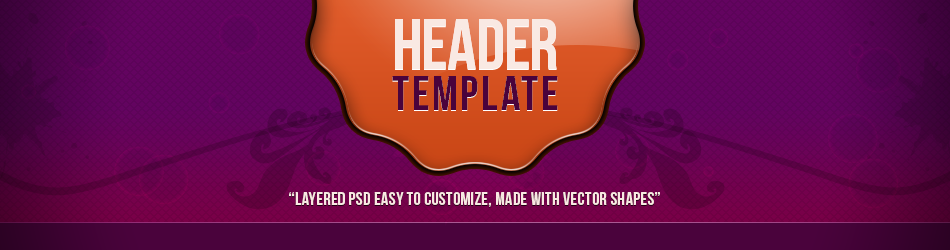
<style>
.page{position:relative;width:950px;height:250px}
.page>*{position:absolute;margin:0}
.t1{font:72px "BebasNeue";color:#f7ffe0}
.t2{font:48px "BebasNeue";letter-spacing:0.06em;color:#4a033c}
.t3{font:18px "BebasNeue";letter-spacing:0.02em;color:#f7ffe0}
</style>
<div class="page">
<p class="t1" style="left:395px;top:19px;width:162px;height:50px">HEADER</p>
<p class="t2" style="left:392px;top:76px;width:166px;height:34px">TEMPLATE</p>
<p class="t3" style="left:289px;top:192px;width:371px;height:15px">“Layered PSD easy to customize, made with vector shapes”</p>
</div>
